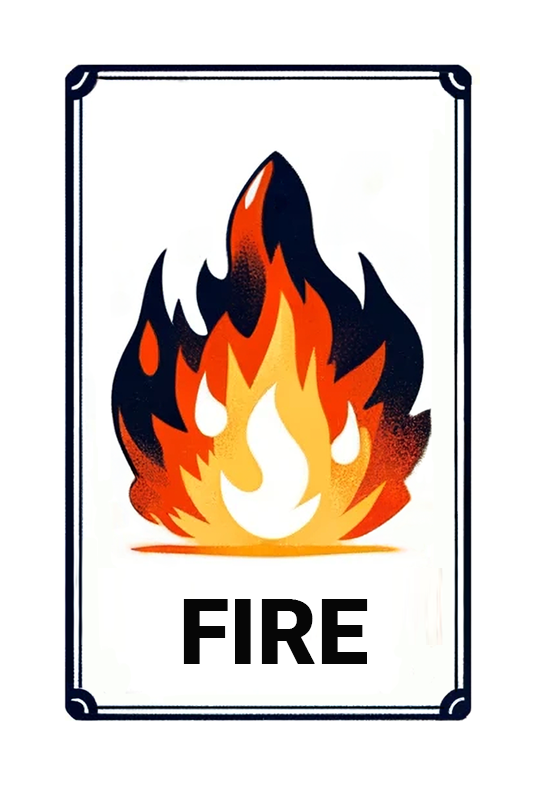
<style>
.page{position:relative;width:534px;height:785px;background:#ffffff}
.page>*{position:absolute;margin:0}
.t1{font:92px "Roboto-Black";color:#060606}
</style>
<div class="page">
<p class="t1" style="left:183px;top:599px;width:185px;height:65px">FIRE</p>
</div>
